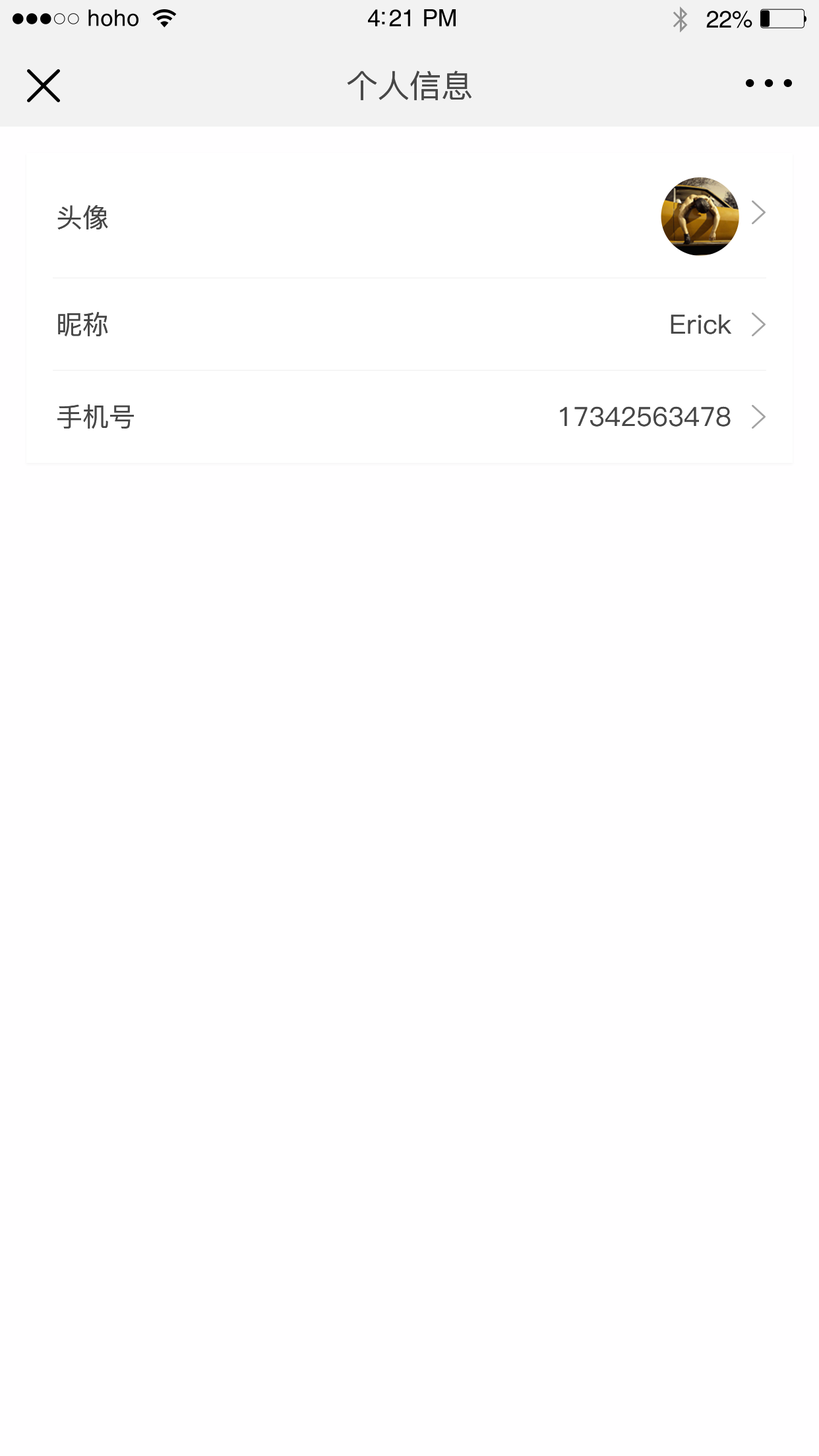
<style>
.page{position:relative;width:819px;height:1456px;background:#fffeff}
.page>*{position:absolute;margin:0}
.t1{font:22.8px "Helvetica";letter-spacing:0.02em;color:#000000}
.t2{font:23.8px "Helvetica";letter-spacing:-0.02em;color:#000000}
.t3{font:31.7px "PingFang-SC-Medium";color:#474747}
.t4{font:26.4px "PingFang-SC-Medium";color:#474747}
</style>
<div class="page">
<p class="t1" style="left:88px;top:9px;width:50px;height:17px">hoho</p>
<p class="t2" style="left:368px;top:9px;width:88px;height:17px">4:21 PM</p>
<p class="t2" style="left:706px;top:11px;width:46px;height:17px">22%</p>
<p class="t3" style="left:347px;top:71px;width:124px;height:29px">个人信息</p>
<p class="t4" style="left:57px;top:205px;width:51px;height:24px">头像</p>
<p class="t4" style="left:58px;top:312px;width:50px;height:25px">昵称</p>
<p class="t4" style="left:671px;top:314px;width:60px;height:20px">Erick</p>
<p class="t4" style="left:57px;top:404px;width:77px;height:25px">手机号</p>
<p class="t4" style="left:560px;top:406px;width:171px;height:21px">17342563478</p>
</div>
